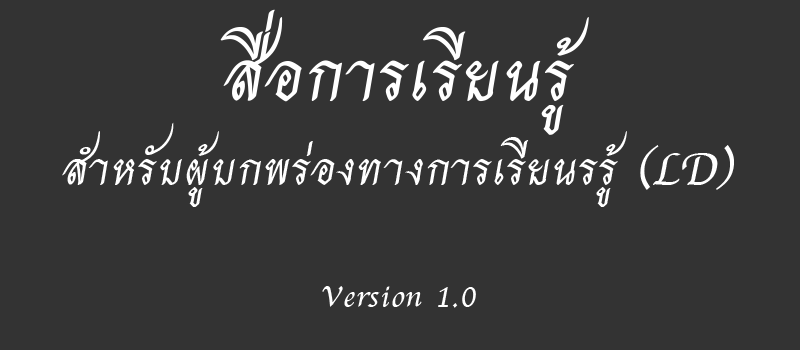
<style>
.page{position:relative;width:800px;height:350px;background:#333333}
.page>*{position:absolute;margin:0}
.t1{font:98px "THCharmofAU";color:#ffffff;scale:1.22 1}
.t2{font:63px "THCharmofAU";color:#ffffff;scale:1.22 1}
.t3{font:42px "THCharmofAU";color:#ffffff;scale:1.22 1}
</style>
<div class="page">
<p class="t1" style="left:220px;top:9px;width:369px;height:126px">สื่อการเรียนรู้</p>
<p class="t2" style="left:62px;top:122px;width:672px;height:85px">สำหรับผู้บกพร่องทางการเรียนรรู้ (LD)</p>
<p class="t3" style="left:322px;top:286px;width:154px;height:22px">Version 1.0</p>
</div>
